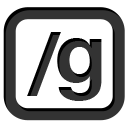
<style>
.page{position:relative;width:128px;height:128px;background:#ffffff}
.page>*{position:absolute;margin:0}
.t1{font:86px "HelveticaNeue-Bold";color:#333333}
</style>
<div class="page">
<p class="t1" style="left:27px;top:32px;width:34px;height:64px">/</p>
<p class="t1" style="left:57px;top:38px;width:45px;height:63px">g</p>
</div>
